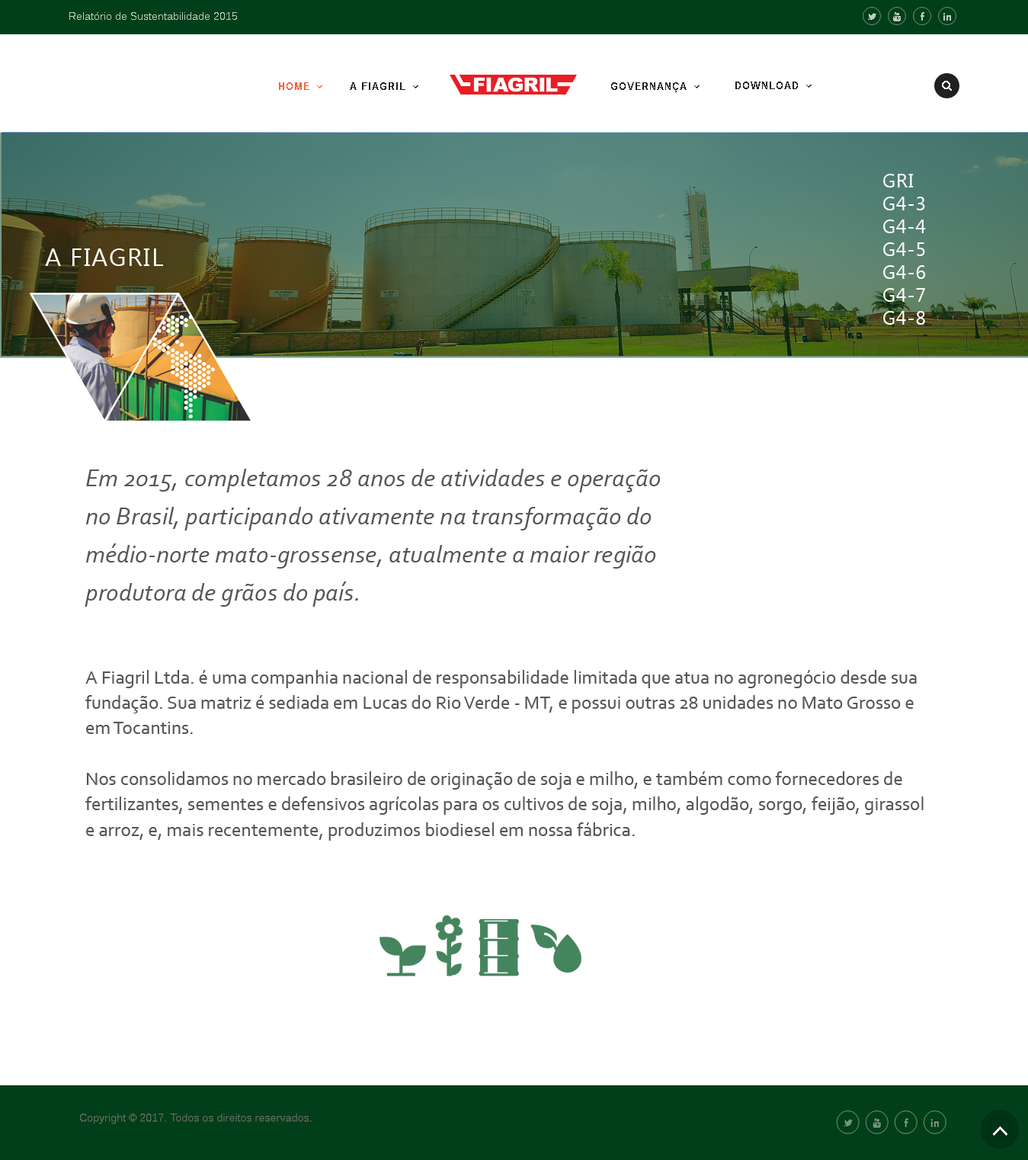
<style>
.page{position:relative;width:1028px;height:1160px;background:#ffffff}
.page>*{position:absolute;margin:0}
.t1{font:19.1px "Ebrima";letter-spacing:0.04em;color:#ffffff}
.t2{font:25.4px "Ebrima";letter-spacing:0.04em;color:#ffffff}
.t3{font:25.4px/38.1px "Corbel-Italic";color:#565656}
.t4{font:19.1px/25.4px "Corbel";color:#565656}
</style>
<div class="page">
<p class="t1" style="left:883px;top:174px;width:43px;height:151px;text-align:justify">GRI<br>G4-3<br>G4-4<br>G4-5<br>G4-6<br>G4-7<br>G4-8</p>
<p class="t2" style="left:45px;top:248px;width:118px;height:18px">A FIAGRIL</p>
<p class="t3" style="left:85px;top:469px;width:576px;height:138px">Em 2015, completamos 28 anos de atividades e operação no Brasil, participando ativamente na transformação do médio-norte mato-grossense, atualmente a maior região produtora de grãos do país.</p>
<p class="t4" style="left:85px;top:670px;width:839px;height:171px">A Fiagril Ltda. é uma companhia nacional de responsabilidade limitada que atua no agronegócio desde sua fundação. Sua matriz é sediada em Lucas do Rio Verde - MT, e possui outras 28 unidades no Mato Grosso e em Tocantins.<br><br>Nos consolidamos no mercado brasileiro de originação de soja e milho, e também como fornecedores de fertilizantes, sementes e defensivos agrícolas para os cultivos de soja, milho, algodão, sorgo, feijão, girassol e arroz, e, mais recentemente, produzimos biodiesel em nossa fábrica.</p>
</div>
